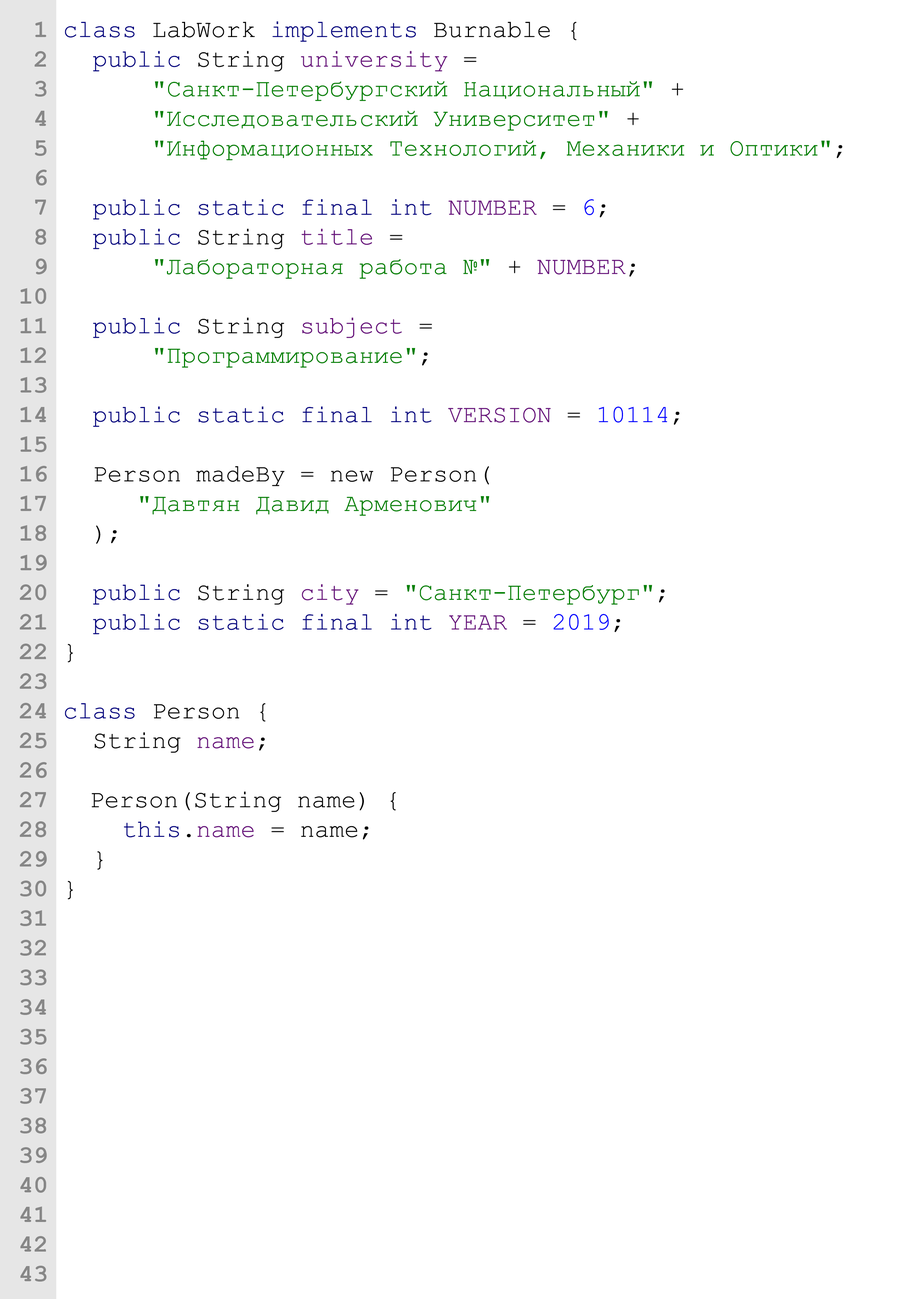
<style>
.page{position:relative;width:918px;height:1299px;background:#ffffff}
.page>*{position:absolute;margin:0}
.t1{font:24.7px "CourierNewPS-BoldMT";color:#878787}
.t2{font:24.7px "CourierNewPSMT";color:#008000}
.t3{font:24.7px "CourierNewPSMT";color:#000080}
.t4{font:24.7px "CourierNewPSMT";color:#000000}
.t5{font:24.7px "CourierNewPSMT";color:#030303}
.t6{font:24.7px "CourierNewPSMT";color:#660e7a}
.t7{font:24.7px "CourierNewPSMT";color:#0000ff}
</style>
<div class="page">
<p class="t1" style="left:20px;top:21px;width:27px;height:1260px;text-align:right">1<br>2<br>3<br>4<br>5<br>6<br>7<br>8<br>9<br>10<br>11<br>12<br>13<br>14<br>15<br>16<br>17<br>18<br>19<br>20<br>21<br>22<br>23<br>24<br>25<br>26<br>27<br>28<br>29<br>30<br>31<br>32<br>33<br>34<br>35<br>36<br>37<br>38<br>39<br>40<br>41<br>42<br>43</p>
<p class="t2" style="left:65px;top:21px;width:778px;height:878px"><span class="t3">class </span><span class="t4">LabWork </span><span class="t3">implements </span><span class="t4">Burnable {<br></span><span class="t3">  public </span><span class="t5">String </span><span class="t6">university </span><span class="t5">= <br>      </span>"Санкт-Петербургский Национальный" <span class="t4">+ <br></span>      "Исследовательский Университет" <span class="t4">+<br></span>      "Информационных Технологий, Механики и Оптики"<span class="t4">;<br><br></span><span class="t3">  public static final int </span><span class="t6">NUMBER </span><span class="t5">= </span><span class="t7">6</span><span class="t5">;<br></span><span class="t3">  public </span><span class="t5">String </span><span class="t6">title </span><span class="t5">= <br>      </span>"Лабораторная работа №" <span class="t4">+ </span><span class="t6">NUMBER</span><span class="t4">;<br><br></span><span class="t3">  public </span><span class="t5">String </span><span class="t6">subject </span><span class="t5">=<br>      </span>"Программирование"<span class="t4">;<br><br></span><span class="t3">  public static final int </span><span class="t6">VERSION </span><span class="t5">= </span><span class="t7">10114</span><span class="t5">;<br><br>  Person madeBy = new Person(<br>     </span>"Давтян Давид Арменович"<span class="t5"> <br>  );<br><br></span><span class="t3">  public </span><span class="t5">String </span><span class="t6">city </span><span class="t5">= </span>"Санкт-Петербург"<span class="t4">;<br></span><span class="t3">  public static final int </span><span class="t6">YEAR </span><span class="t5">= </span><span class="t7">2019</span><span class="t5">;<br>}<br><br></span><span class="t3">class </span><span class="t4">Person {<br>  String </span><span class="t6">name</span><span class="t4">;<br><br>  Person(String name) {<br>    </span><span class="t3">this</span><span class="t4">.</span><span class="t6">name</span><span class="t4"> = name;<br>  }<br>}</span></p>
</div>
